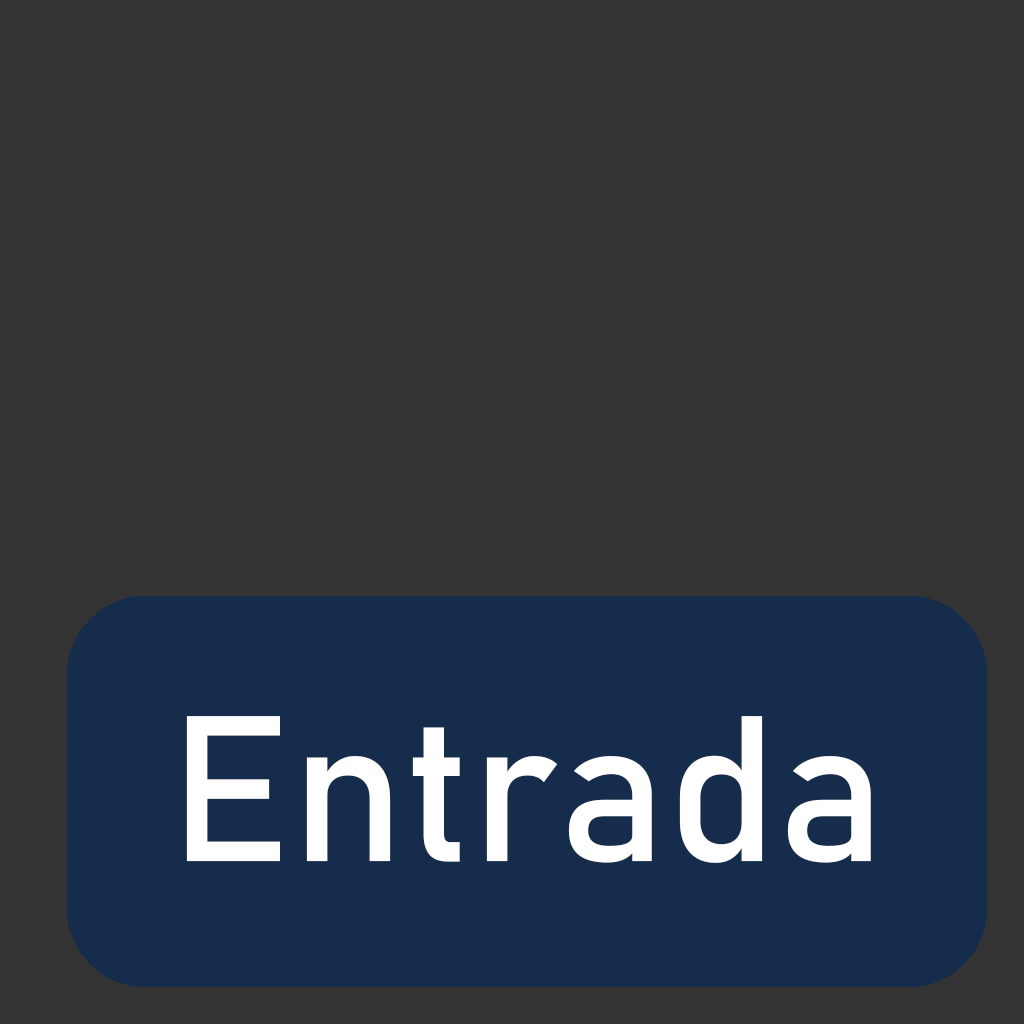
<style>
.page{position:relative;width:1024px;height:1024px;background:#333333}
.page>*{position:absolute;margin:0}
.t1{font:204px "Bahnschrift";color:#ffffff}
</style>
<div class="page">
<p class="t1" style="left:186px;top:716px;width:685px;height:147px">Entrada</p>
</div>
